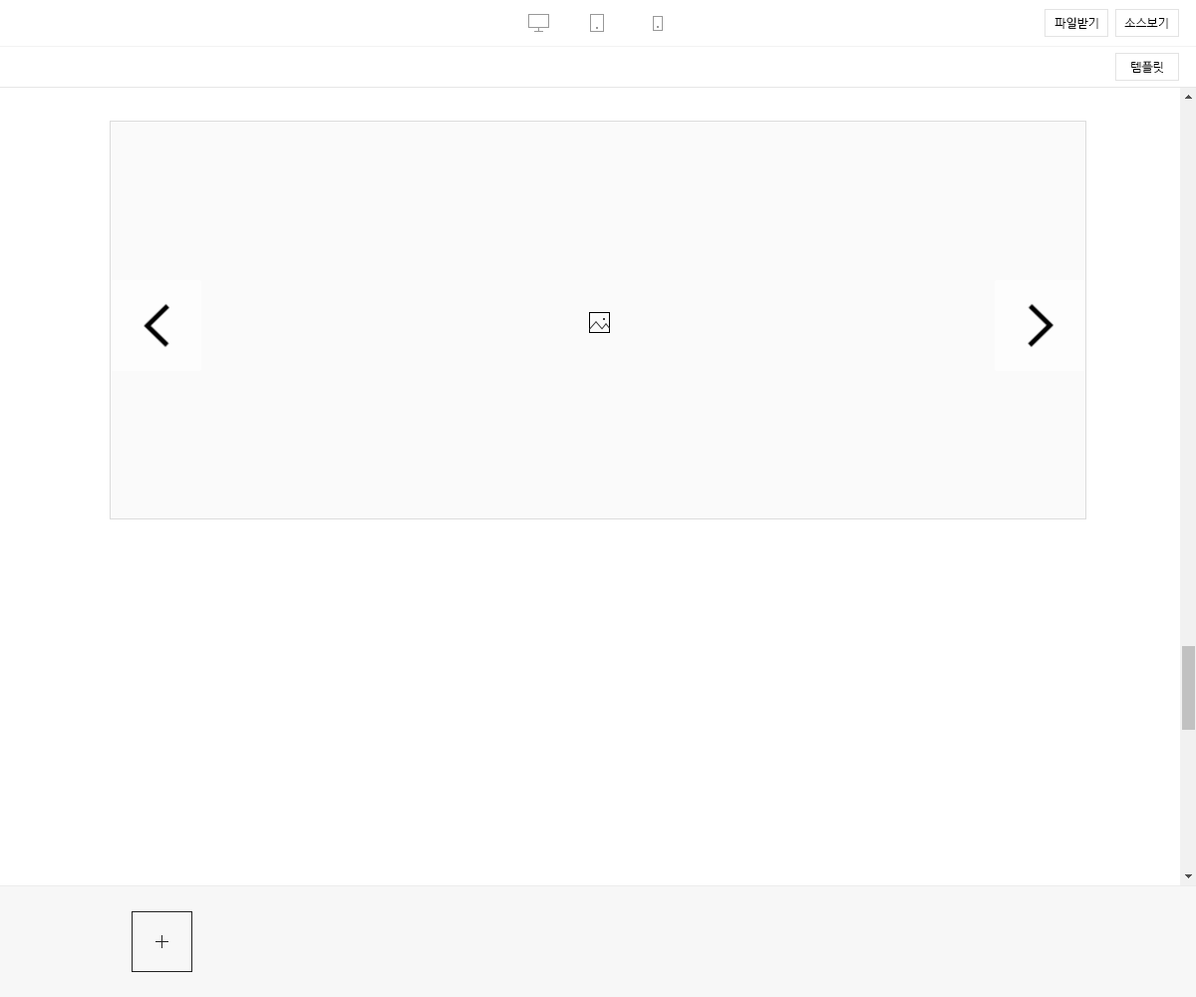
<style>
.page{position:relative;width:1196px;height:997px;background:#ffffff}
.page>*{position:absolute;margin:0}
.t1{font:12px "NanumGothic";letter-spacing:-0.01em;color:#000000}
</style>
<div class="page">
<p class="t1" style="left:1055px;top:17px;width:44px;height:12px">파일받기</p>
<p class="t1" style="left:1124px;top:18px;width:44px;height:11px">소스보기</p>
<p class="t1" style="left:1131px;top:61px;width:32px;height:12px">템플릿</p>
</div>
